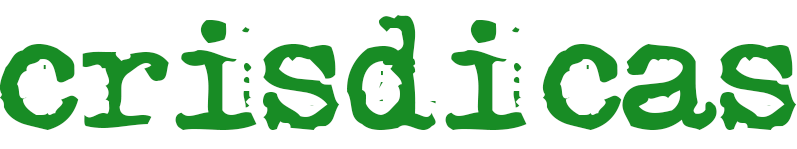
<style>
.page{position:relative;width:797px;height:149px;background:#ffffff}
.page>*{position:absolute;margin:0}
.t1{font:144.1px "Adler";color:#188c25}
</style>
<div class="page">
<p class="t1" style="left:0px;top:15px;width:797px;height:115px">crisdicas</p>
</div>
